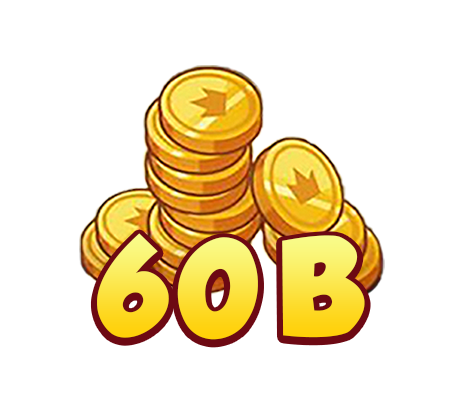
<style>
.page{position:relative;width:464px;height:410px;background:#ffffff}
.page>*{position:absolute;margin:0}
.t1{font:120px "TadeoFont-Bold";letter-spacing:0.09em}
.t2{font:120px "TadeoFont-Bold";letter-spacing:0.21em}
.t3{font:150px "TadeoFont-Bold";letter-spacing:0.21em}
</style>
<div class="page">
<p class="t1" style="left:97px;top:233px;width:268px;height:107px">6<span class="t2">0</span><span class="t3">B</span></p>
</div>
